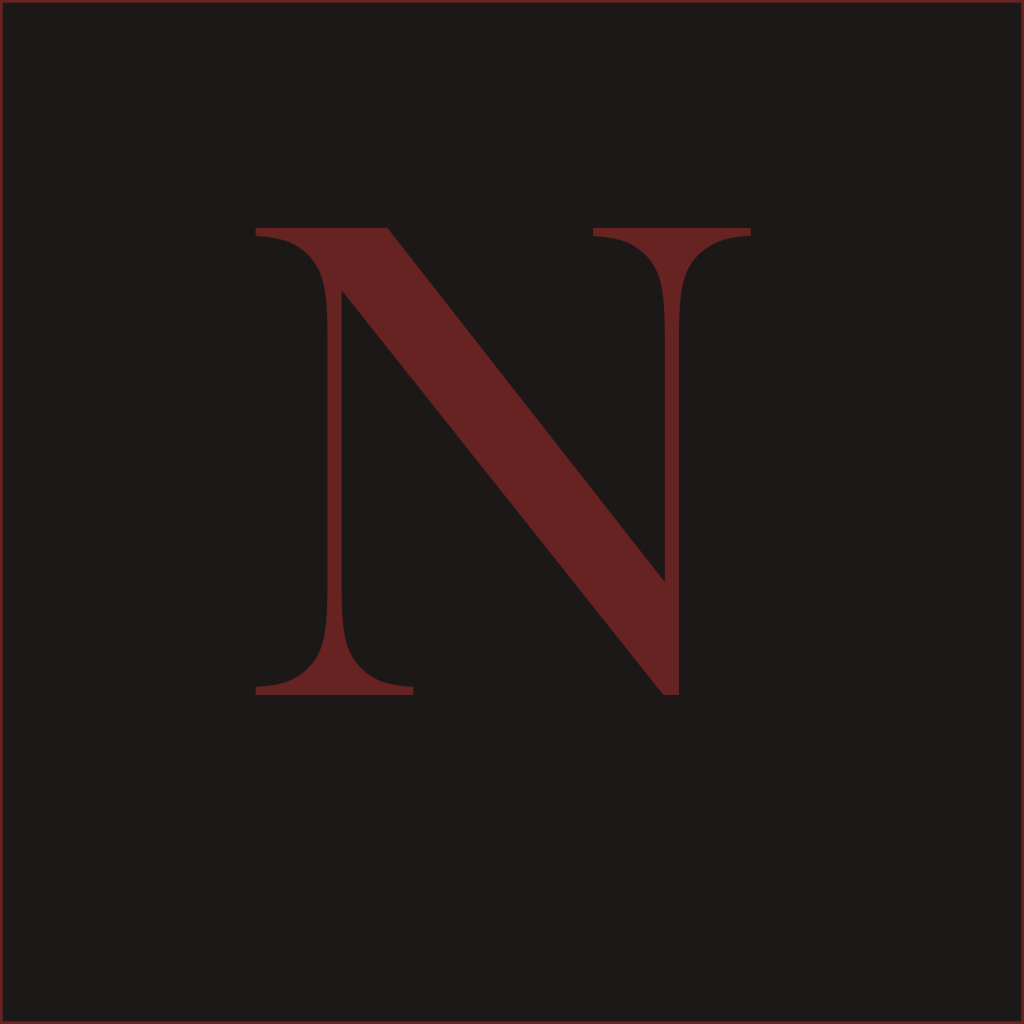
<style>
.page{position:relative;width:1024px;height:1024px;background:#1c1818}
.page>*{position:absolute;margin:0}
.t1{font:700px "BaskOldFace";color:#672222}
</style>
<div class="page">
<p class="t1" style="left:255px;top:227px;width:496px;height:468px">N</p>
</div>
